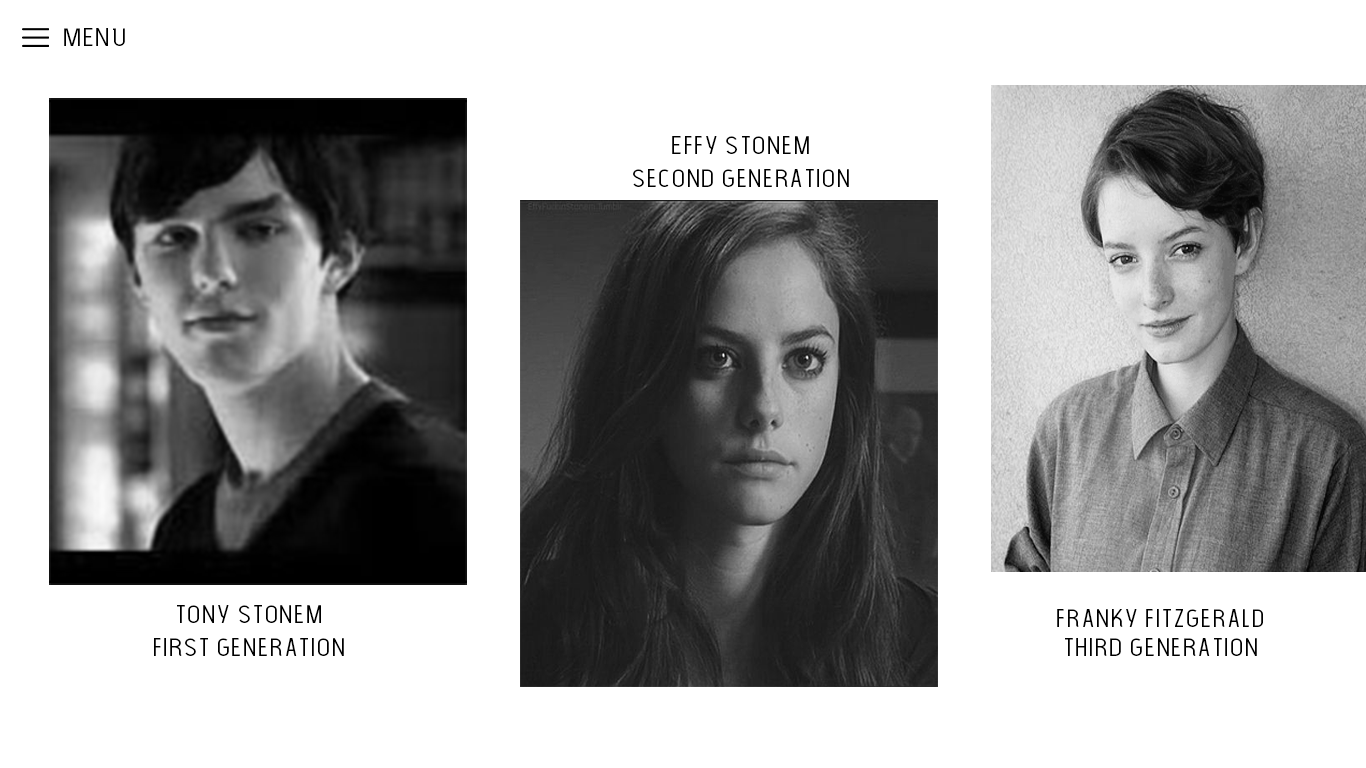
<style>
.page{position:relative;width:1366px;height:768px;background:#ffffff}
.page>*{position:absolute;margin:0}
.t1{font:24px "TheLightFont";color:#000000;scale:1.2 1}
.t2{font:24px/24px "TheLightFont";color:#000000;scale:1.2 1}
.t3{font:24px/5.4px "TheLightFont";color:#000000;scale:1.2 1}
</style>
<div class="page">
<p class="t1" style="left:64px;top:28px;width:61px;height:18px">MENU</p>
<p class="t2" style="left:633px;top:136px;width:216px;height:51px;text-align:center"><span class="t3">Effy stonem<br><br></span>second generation</p>
<p class="t2" style="left:154px;top:605px;width:190px;height:51px;text-align:center">tony stonem<br><br>first generation</p>
<p class="t3" style="left:1057px;top:609px;width:206px;height:47px;text-align:center">franky fitzgerald<br><br><span class="t2">third generation</span></p>
</div>
